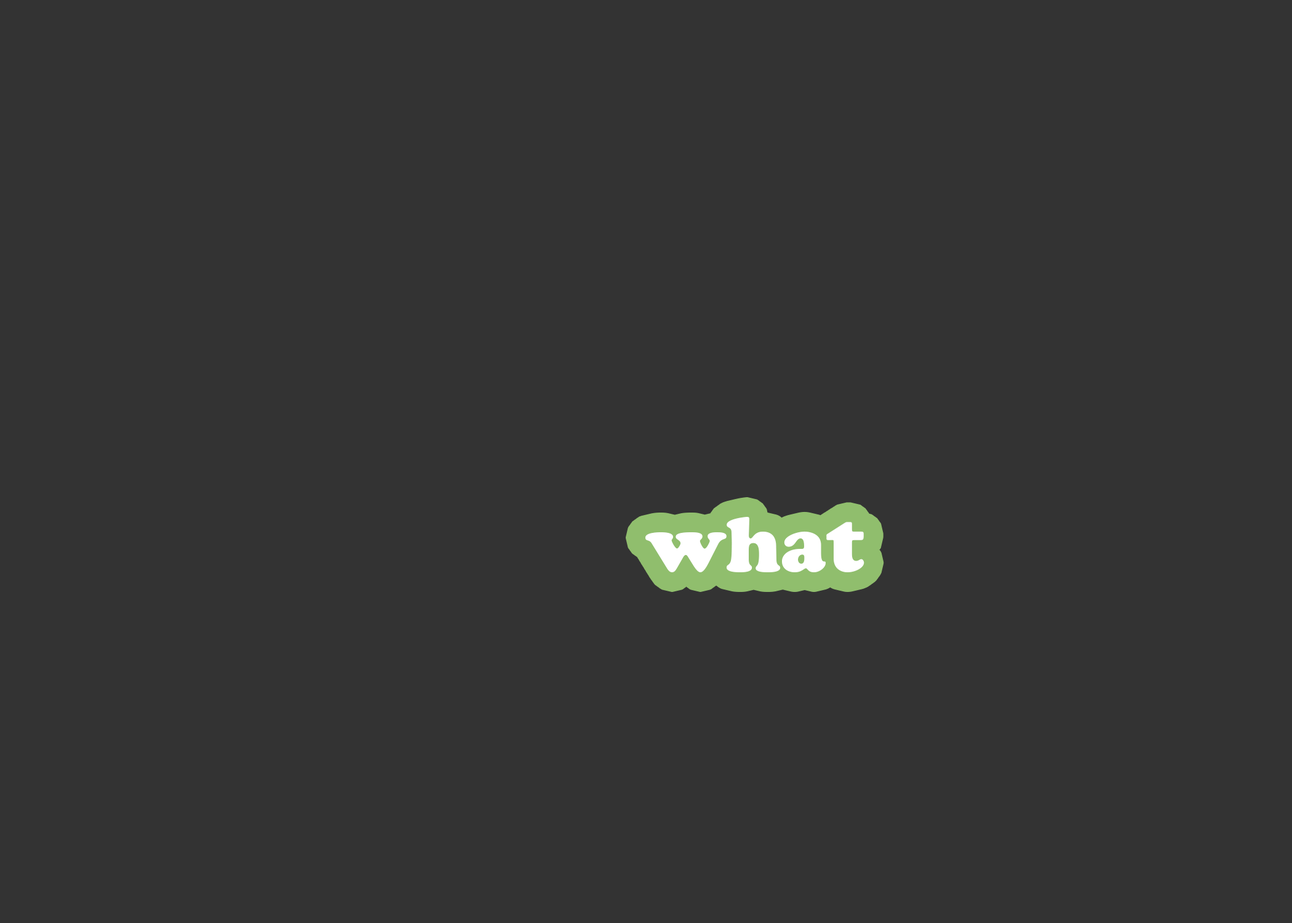
<style>
.page{position:relative;width:1292px;height:923px;background:#333333}
.page>*{position:absolute;margin:0}
.t1{font:76.9px "CooperBlackStd";color:#ffffff}
</style>
<div class="page">
<p class="t1" style="left:645px;top:517px;width:219px;height:55px">what</p>
</div>
